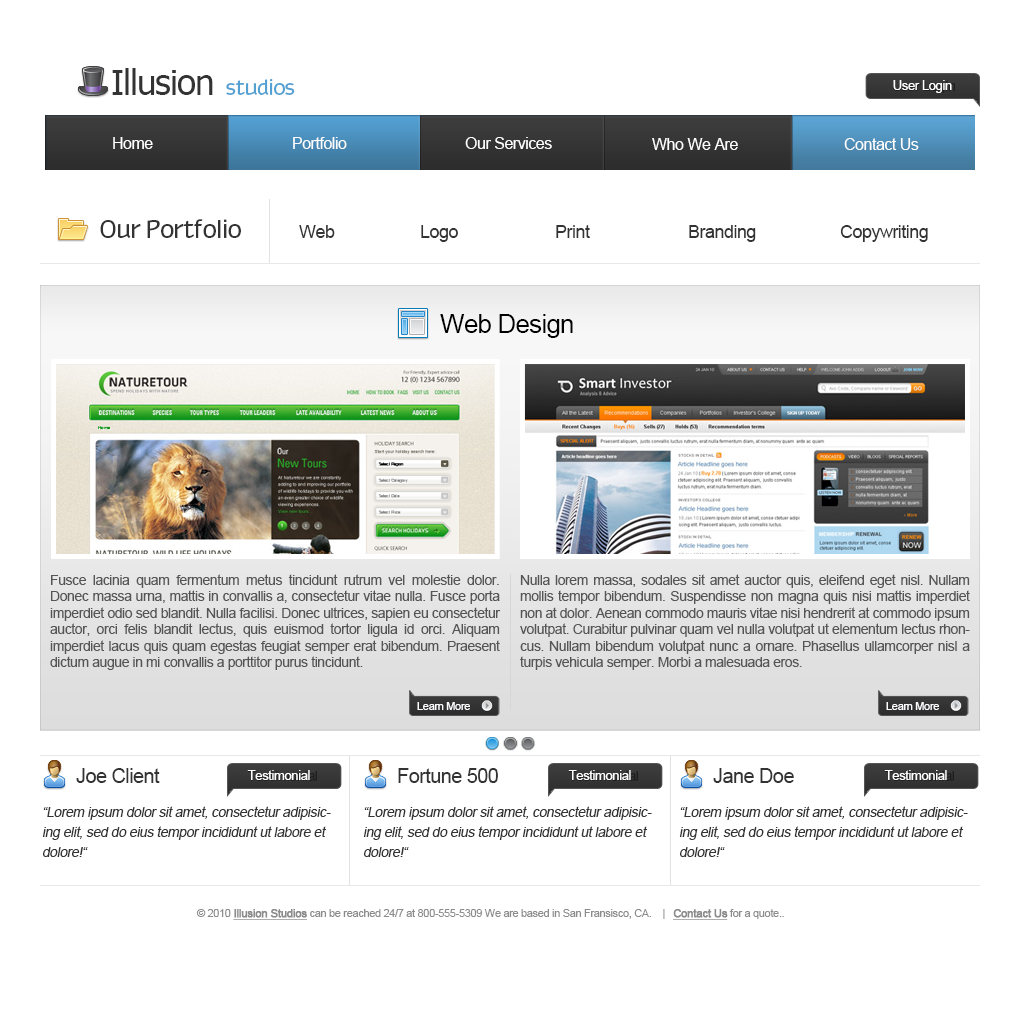
<style>
.page{position:relative;width:1020px;height:1020px;background:#ffffff}
.page>*{position:absolute;margin:0}
.t1{font:34.8px "Tahoma";letter-spacing:-0.03em;color:#333333}
.t2{font:20.4px "Myndraine";letter-spacing:-0.03em;color:#53a0d3}
.t3{font:13px "ArialMT";letter-spacing:-0.03em;color:#ffffff}
.t4{font:16px "ArialMT";letter-spacing:-0.03em;color:#ffffff}
.t5{font:24px "Myndraine";letter-spacing:-0.03em;color:#333333}
.t6{font:18px "ArialMT";letter-spacing:-0.03em;color:#333333}
.t7{font:26px "ArialMT";letter-spacing:-0.03em;color:#000000}
.t8{font:14px/16.4px "ArialMT";letter-spacing:-0.03em;color:#555555}
.t9{font:11px "ArialMT";letter-spacing:-0.03em;color:#fdfdff}
.t10{font:20px "ArialMT";letter-spacing:-0.03em;color:#333333}
.t11{font:14px/20px "ArialMT";letter-spacing:-0.03em;color:#333333;font-style:italic}
.t12{font:11px "ArialMT";letter-spacing:-0.03em;color:#8c8c8c}
.t13{font:11px "ArialMT";letter-spacing:-0.03em;color:#8c8c8c;font-weight:bold;text-decoration:underline}
</style>
<div class="page">
<p class="t1" style="left:112px;top:68px;width:101px;height:27px">Illusion</p>
<p class="t2" style="left:226px;top:79px;width:69px;height:16px">studios</p>
<p class="t3" style="left:893px;top:80px;width:59px;height:13px">User Login</p>
<p class="t4" style="left:113px;top:137px;width:40px;height:12px">Home</p>
<p class="t4" style="left:293px;top:137px;width:54px;height:12px">Portfolio</p>
<p class="t4" style="left:465px;top:137px;width:87px;height:12px">Our Services</p>
<p class="t4" style="left:652px;top:138px;width:86px;height:12px">Who We Are</p>
<p class="t4" style="left:844px;top:138px;width:75px;height:12px">Contact Us</p>
<p class="t5" style="left:100px;top:219px;width:141px;height:19px">Our Portfolio</p>
<p class="t6" style="left:299px;top:225px;width:36px;height:13px">Web</p>
<p class="t6" style="left:421px;top:225px;width:37px;height:17px">Logo</p>
<p class="t6" style="left:556px;top:225px;width:34px;height:13px">Print</p>
<p class="t6" style="left:689px;top:225px;width:67px;height:17px">Branding</p>
<p class="t6" style="left:840px;top:225px;width:88px;height:17px">Copywriting</p>
<p class="t7" style="left:440px;top:314px;width:133px;height:24px">Web Design</p>
<p class="t8" style="left:50px;top:574px;width:451px;height:96px;text-align:justify">Fusce lacinia quam fermentum metus tincidunt rutrum vel molestie dolor. Donec massa urna, mattis in convallis a, consectetur vitae nulla. Fusce porta imperdiet odio sed blandit. Nulla facilisi. Donec ultrices, sapien eu consectetur auctor, orci felis blandit lectus, quis euismod tortor ligula id orci. Aliquam imperdiet lacus quis quam egestas feugiat semper erat bibendum. Praesent dictum augue in mi convallis a porttitor purus tincidunt.</p>
<p class="t8" style="left:520px;top:574px;width:450px;height:96px;text-align:justify">Nulla lorem massa, sodales sit amet auctor quis, eleifend eget nisl. Nullam mollis tempor bibendum. Suspendisse non magna quis nisi mattis imperdiet non at dolor. Aenean commodo mauris vitae nisi hendrerit at commodo ipsum volutpat. Curabitur pulvinar quam vel nulla volutpat ut elementum lectus rhoncus. Nullam bibendum volutpat nunc a ornare. Phasellus ullamcorper nisl a turpis vehicula semper. Morbi a malesuada eros.</p>
<p class="t9" style="left:417px;top:702px;width:53px;height:8px">Learn More</p>
<p class="t9" style="left:886px;top:702px;width:53px;height:8px">Learn More</p>
<p class="t10" style="left:76px;top:768px;width:84px;height:15px">Joe Client</p>
<p class="t3" style="left:247px;top:770px;width:63px;height:10px">Testimonial</p>
<p class="t10" style="left:398px;top:768px;width:100px;height:15px">Fortune 500</p>
<p class="t3" style="left:568px;top:770px;width:63px;height:10px">Testimonial</p>
<p class="t10" style="left:713px;top:768px;width:81px;height:15px">Jane Doe</p>
<p class="t3" style="left:884px;top:770px;width:63px;height:10px">Testimonial</p>
<p class="t11" style="left:42px;top:806px;width:289px;height:51px">“Lorem ipsum dolor sit amet, consectetur adipisicing elit, sed do eius tempor incididunt ut labore et dolore!“</p>
<p class="t11" style="left:363px;top:806px;width:289px;height:51px">“Lorem ipsum dolor sit amet, consectetur adipisicing elit, sed do eius tempor incididunt ut labore et dolore!“</p>
<p class="t11" style="left:679px;top:806px;width:289px;height:51px">“Lorem ipsum dolor sit amet, consectetur adipisicing elit, sed do eius tempor incididunt ut labore et dolore!“</p>
<p class="t12" style="left:196px;top:909px;width:588px;height:11px">© 2010 <span class="t13">Illusion Studios</span> can be reached 24/7 at 800-555-5309 We are based in San Fransisco, CA.    |   <span class="t13">Contact Us</span> for a quote..</p>
</div>
